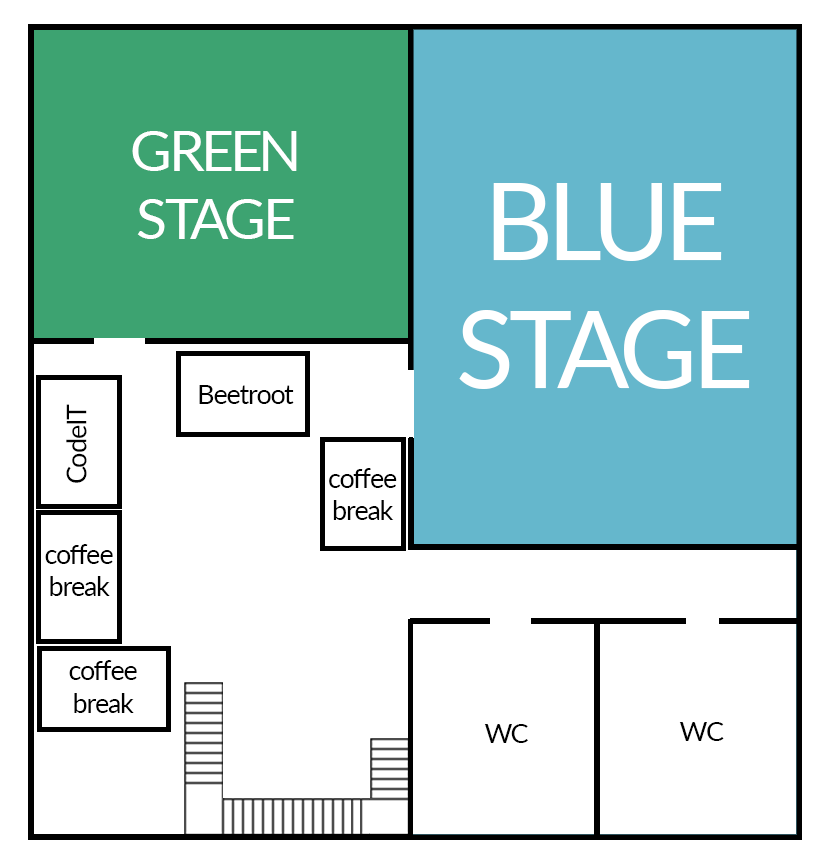
<style>
.page{position:relative;width:826px;height:868px;background:#ffffff}
.page>*{position:absolute;margin:0}
.t1{font:57px "Lato-Regular";letter-spacing:-0.04em;color:#ffffff}
.t2{font:107px "Lato-Regular";letter-spacing:-0.04em;color:#ffffff}
.t3{font:27px "Lato-Regular";letter-spacing:-0.04em;color:#000000}
</style>
<div class="page">
<p class="t1" style="left:132px;top:131px;width:165px;height:108px;text-align:center">GREEN<br>STAGE</p>
<p class="t2" style="left:459px;top:183px;width:291px;height:206px;text-align:center">BLUE<br>STAGE</p>
<p class="t3" style="left:199px;top:385px;width:95px;height:19px">Beetroot</p>
<p class="t3" style="left:66px;top:404px;width:21px;height:79px;rotate:-90deg">CodeIT</p>
<p class="t3" style="left:329px;top:468px;width:68px;height:52px;text-align:center">coffee<br>break</p>
<p class="t3" style="left:45px;top:544px;width:68px;height:52px;text-align:center">coffee<br>break</p>
<p class="t3" style="left:69px;top:660px;width:68px;height:53px;text-align:center">coffee<br>break</p>
<p class="t3" style="left:484px;top:724px;width:44px;height:19px">WC</p>
<p class="t3" style="left:679px;top:722px;width:45px;height:19px">WC</p>
</div>
